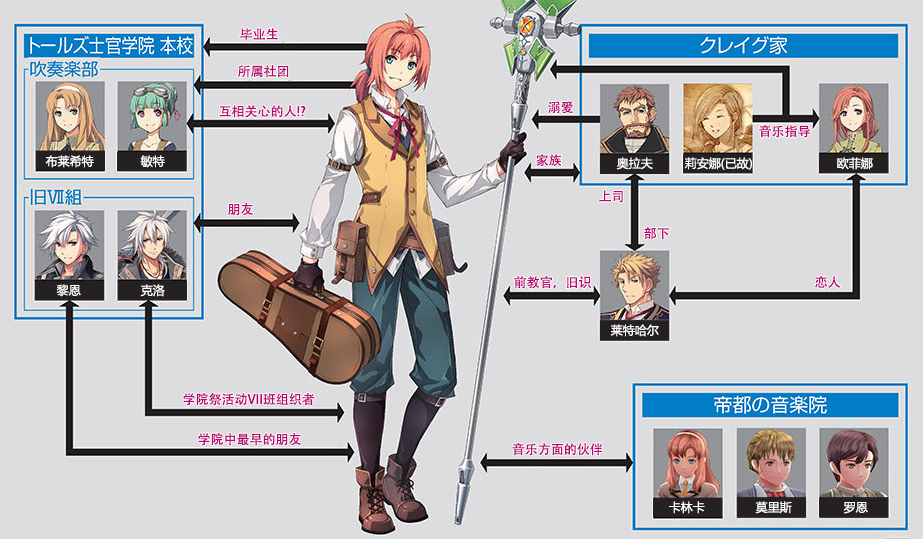
<style>
.page{position:relative;width:923px;height:539px;background:#dddddf}
.page>*{position:absolute;margin:0}
.t1{font:13px "AdobeHeitiStd-Regular";color:#b70773}
.t2{font:12px "MicrosoftYaHei";color:#ffffff}
</style>
<div class="page">
<p class="t1" style="left:240px;top:28px;width:38px;height:13px">毕业生</p>
<p class="t1" style="left:238px;top:65px;width:51px;height:13px">所属社团</p>
<p class="t1" style="left:548px;top:101px;width:25px;height:13px">溺爱</p>
<p class="t1" style="left:219px;top:105px;width:87px;height:13px">互相关心的人!?</p>
<p class="t1" style="left:759px;top:125px;width:51px;height:13px">音乐指导</p>
<p class="t2" style="left:45px;top:155px;width:49px;height:13px">布莱希特</p>
<p class="t2" style="left:140px;top:155px;width:25px;height:13px">敏特</p>
<p class="t1" style="left:536px;top:154px;width:26px;height:13px">家族</p>
<p class="t2" style="left:616px;top:157px;width:37px;height:13px">奥拉夫</p>
<p class="t2" style="left:684px;top:157px;width:68px;height:13px">莉安娜(已故)</p>
<p class="t2" style="left:837px;top:157px;width:36px;height:13px">欧菲娜</p>
<p class="t1" style="left:599px;top:190px;width:24px;height:13px">上司</p>
<p class="t1" style="left:228px;top:203px;width:25px;height:13px">朋友</p>
<p class="t1" style="left:644px;top:227px;width:25px;height:13px">部下</p>
<p class="t1" style="left:514px;top:276px;width:78px;height:13px">前教官，旧识</p>
<p class="t1" style="left:815px;top:276px;width:26px;height:12px">恋人</p>
<p class="t2" style="left:56px;top:284px;width:25px;height:13px">黎恩</p>
<p class="t2" style="left:140px;top:284px;width:25px;height:13px">克洛</p>
<p class="t2" style="left:610px;top:324px;width:49px;height:13px">莱特哈尔</p>
<p class="t1" style="left:183px;top:393px;width:132px;height:13px">学院祭活动VII班组织者</p>
<p class="t1" style="left:198px;top:433px;width:103px;height:13px">学院中最早的朋友</p>
<p class="t1" style="left:512px;top:443px;width:91px;height:13px">音乐方面的伙伴</p>
<p class="t2" style="left:669px;top:501px;width:36px;height:13px">卡林卡</p>
<p class="t2" style="left:755px;top:501px;width:37px;height:13px">莫里斯</p>
<p class="t2" style="left:843px;top:502px;width:25px;height:12px">罗恩</p>
</div>
